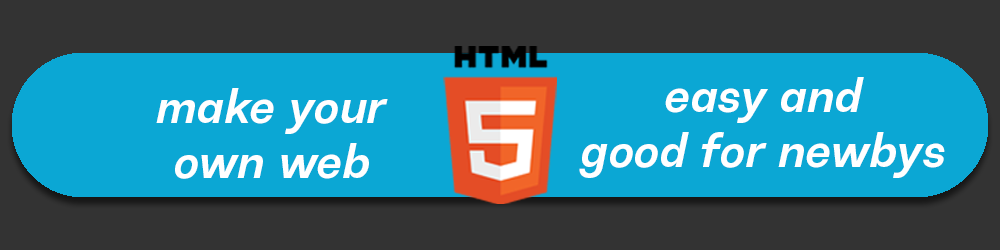
<style>
.page{position:relative;width:1000px;height:250px;background:#0ba7d4}
.page>*{position:absolute;margin:0}
.t1{font:45.8px "ResistSansDisplay-MediumOblique";letter-spacing:0.02em;color:#ffffff}
</style>
<div class="page">
<p class="t1" style="left:579px;top:77px;width:366px;height:101px;text-align:center">easy and<br>good for newbys</p>
<p class="t1" style="left:156px;top:88px;width:232px;height:91px;text-align:center">make your<br>own web</p>
</div>
